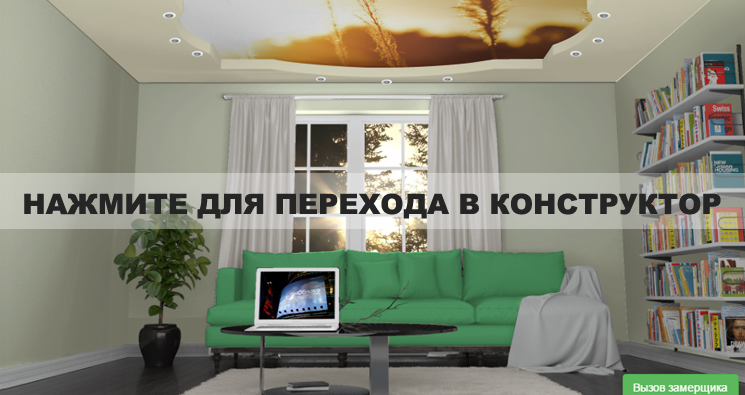
<style>
.page{position:relative;width:745px;height:395px}
.page>*{position:absolute;margin:0}
.t1{font:28px "Arial-Black";color:#252525}
</style>
<div class="page">
<p class="t1" style="left:24px;top:193px;width:697px;height:26px">НАЖМИТЕ ДЛЯ ПЕРЕХОДА В КОНСТРУКТОР</p>
</div>
